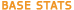
<style>
.page{position:relative;width:74px;height:10px;background:#ffffff}
.page>*{position:absolute;margin:0}
.t1{font:10.7px "Tahoma";letter-spacing:0.1em;color:#ef9525;font-weight:bold}
</style>
<div class="page">
<p class="t1" style="left:2px;top:1px;width:70px;height:9px">BASE STATS</p>
</div>
